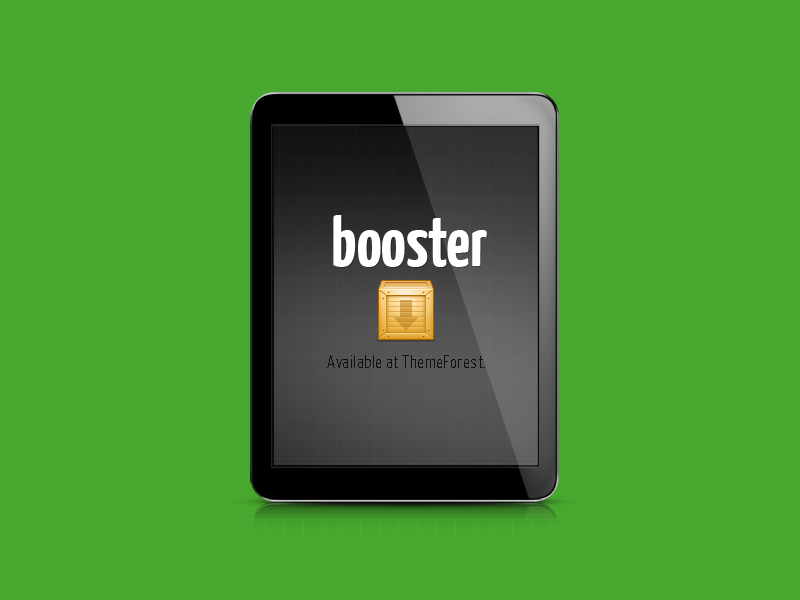
<style>
.page{position:relative;width:800px;height:600px;background:#47a72e}
.page>*{position:absolute;margin:0}
.t1{font:70.3px "YanoneKaffeesatz-Bold";color:#ffffff}
.t2{font:18px "YanoneKaffeesatz-Light";letter-spacing:0.025em;color:#111111}
</style>
<div class="page">
<p class="t1" style="left:333px;top:215px;width:154px;height:52px">booster</p>
<p class="t2" style="left:327px;top:355px;width:158px;height:13px">Available at ThemeForest.</p>
</div>
